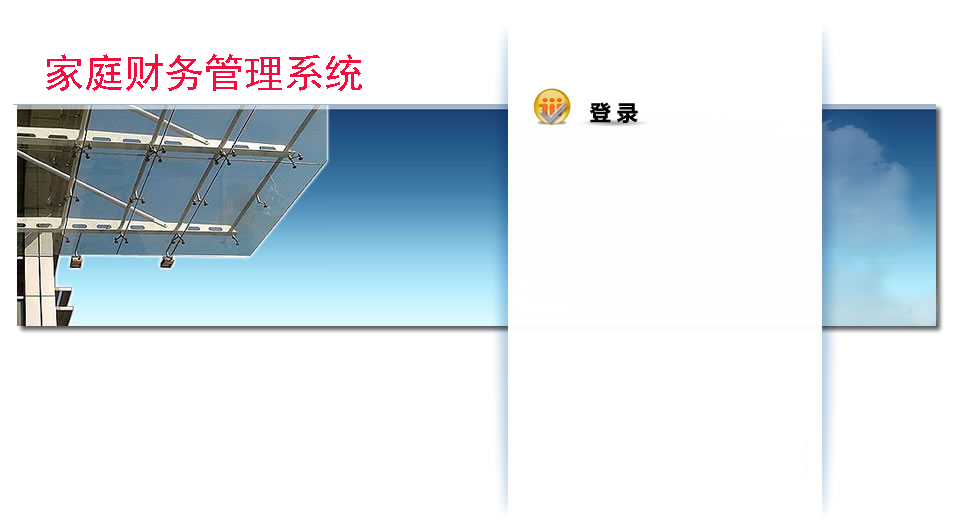
<style>
.page{position:relative;width:953px;height:521px;background:#ffffff}
.page>*{position:absolute;margin:0}
.t1{font:39.6px "SimHei";color:#f30d3e}
</style>
<div class="page">
<p class="t1" style="left:46px;top:54px;width:316px;height:37px">家庭财务管理系统</p>
</div>
